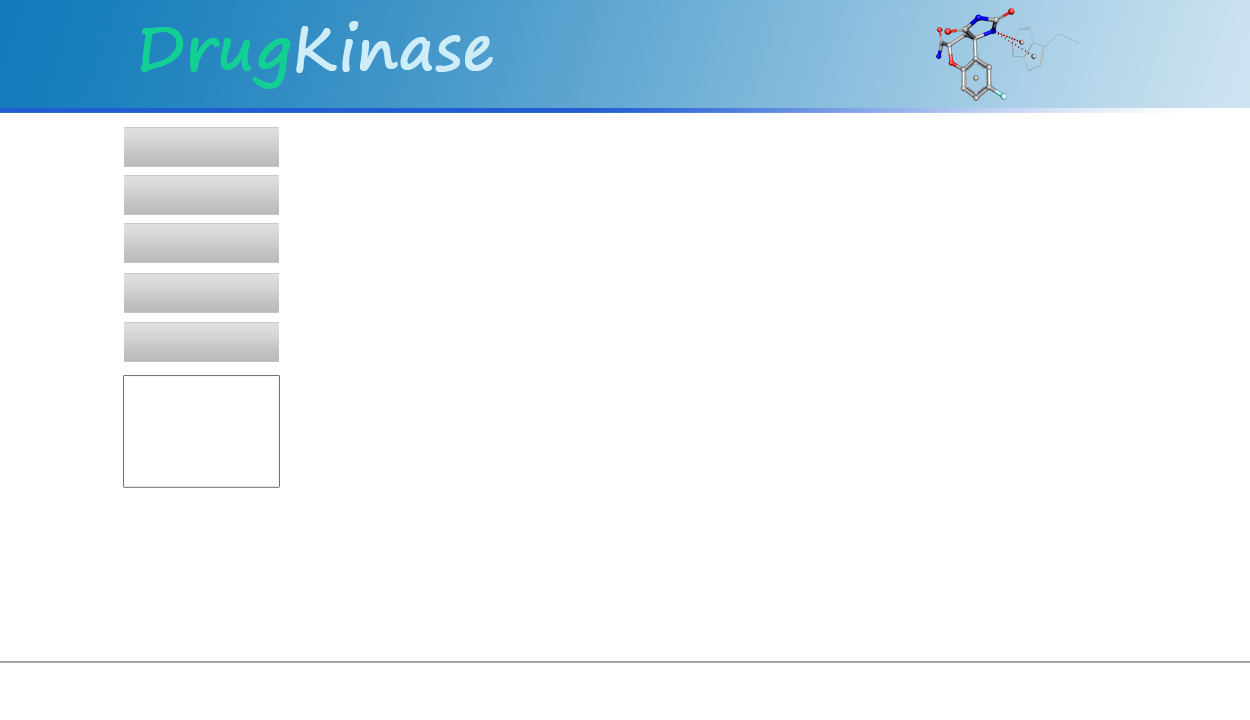
<style>
.page{position:relative;width:1250px;height:720px;background:#ffffff}
.page>*{position:absolute;margin:0}
.t1{font:60px "SegoePrint";color:#cdedf8;font-weight:bold}
.t2{font:60px "SegoePrint";color:#12cf93;font-weight:bold}
</style>
<div class="page">
<p class="t1" style="left:140px;top:21px;width:353px;height:68px"><span class="t2">Drug</span>Kinase</p>
</div>
